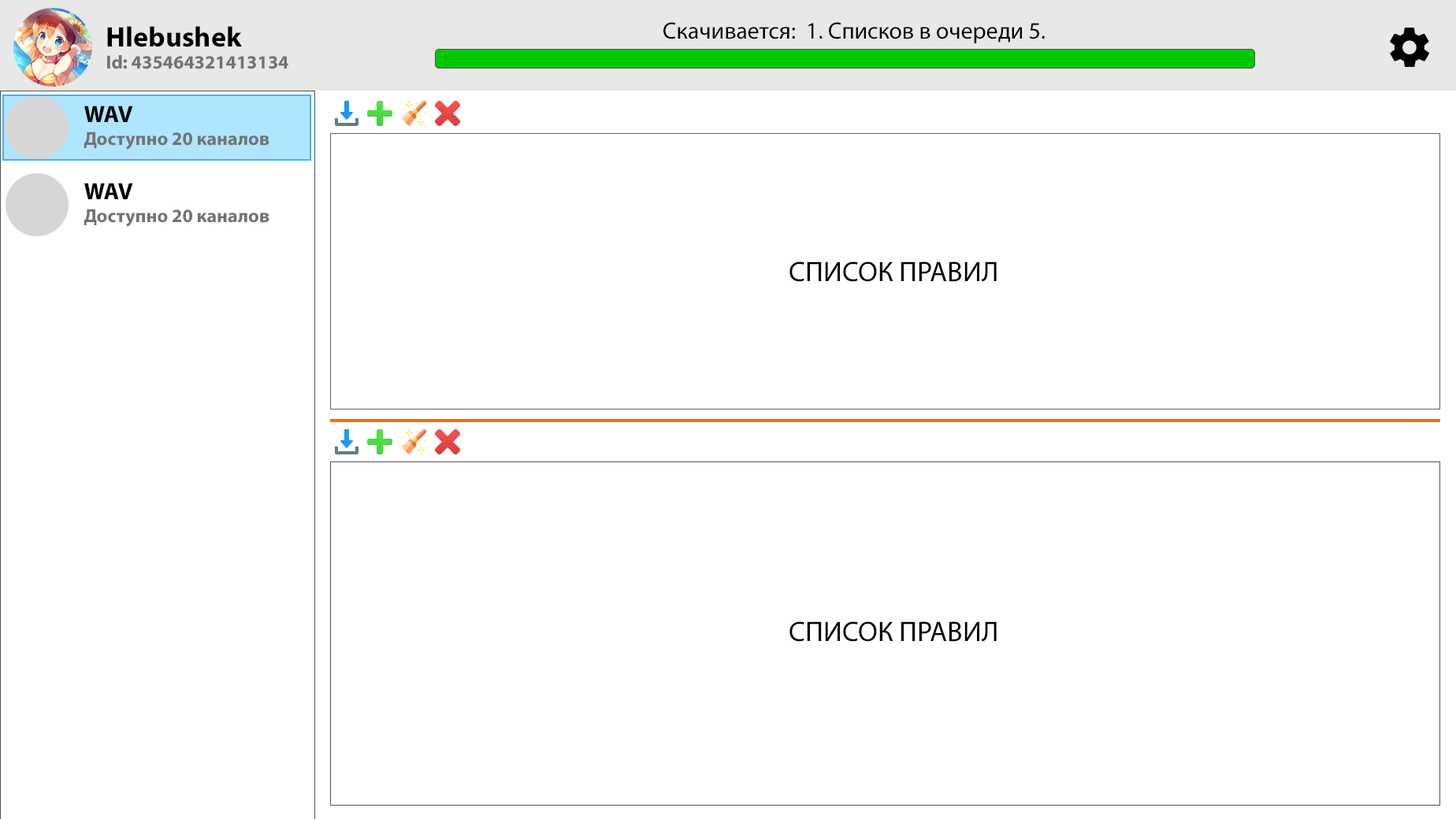
<style>
.page{position:relative;width:1456px;height:819px;background:#ffffff}
.page>*{position:absolute;margin:0}
.t1{font:28.4px "MyriadPro-Bold";color:#000000}
.t2{font:23.6px "MyriadPro-Regular";color:#000000}
.t3{font:18.9px "MyriadPro-Bold";color:#727272}
.t4{font:18.9px "MyriadPro-Bold";color:#737373}
.t5{font:23.6px "MyriadPro-Bold";color:#000000}
.t6{font:28.4px "MyriadPro-Regular";color:#000000}
</style>
<div class="page">
<p class="t1" style="left:107px;top:26px;width:135px;height:21px">Hlebushek</p>
<p class="t2" style="left:663px;top:22px;width:381px;height:21px">Скачивается:  1. Списков в очереди 5.</p>
<p class="t3" style="left:107px;top:55px;width:181px;height:14px">Id: 435464321413134</p>
<p class="t4" style="left:83px;top:106px;width:186px;height:44px"><span class="t5">WAV<br></span>Доступно 20 каналов</p>
<p class="t4" style="left:83px;top:183px;width:186px;height:44px"><span class="t5">WAV<br></span>Доступно 20 каналов</p>
<p class="t6" style="left:789px;top:262px;width:207px;height:20px">СПИСОК ПРАВИЛ</p>
<p class="t6" style="left:789px;top:621px;width:207px;height:21px">СПИСОК ПРАВИЛ</p>
</div>
